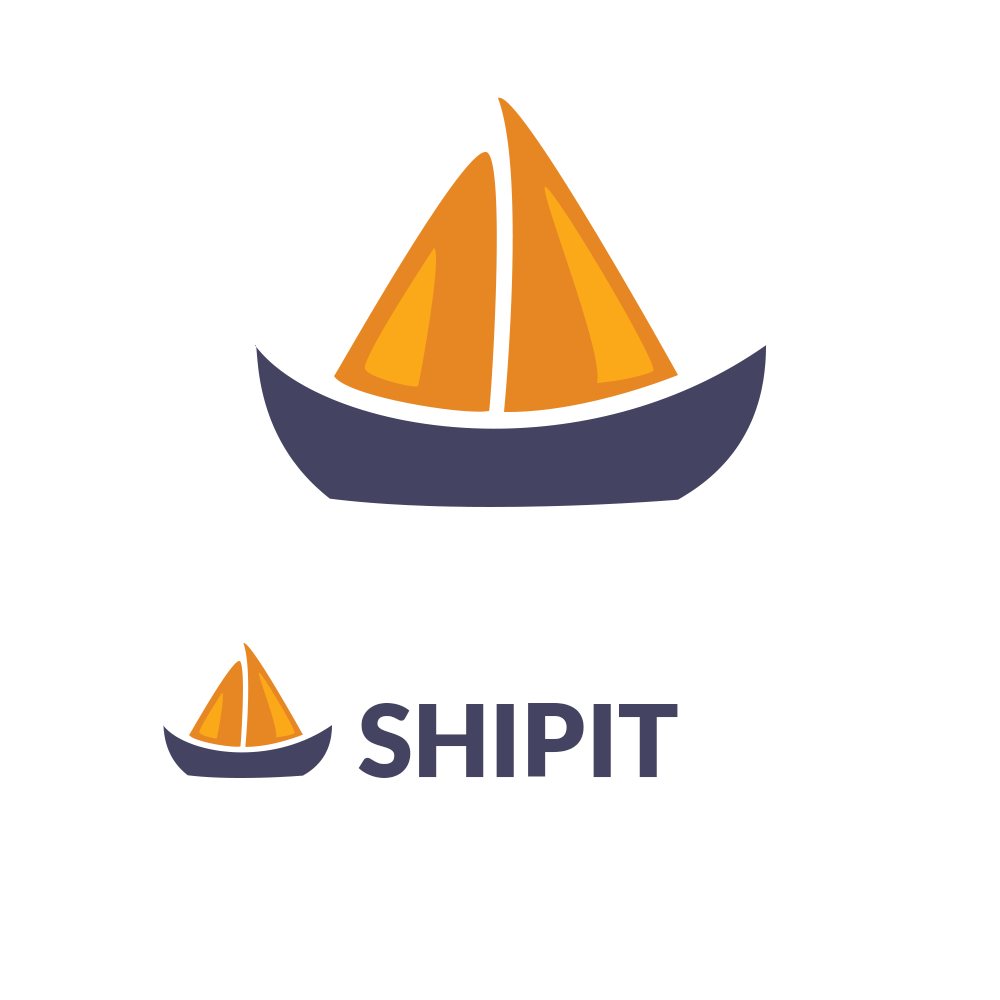
<style>
.page{position:relative;width:1000px;height:1000px;background:#ffffff}
.page>*{position:absolute;margin:0}
.t1{font:101px "Lato-Black";color:#444361}
</style>
<div class="page">
<p class="t1" style="left:358px;top:703px;width:320px;height:75px">SHIPIT</p>
</div>
